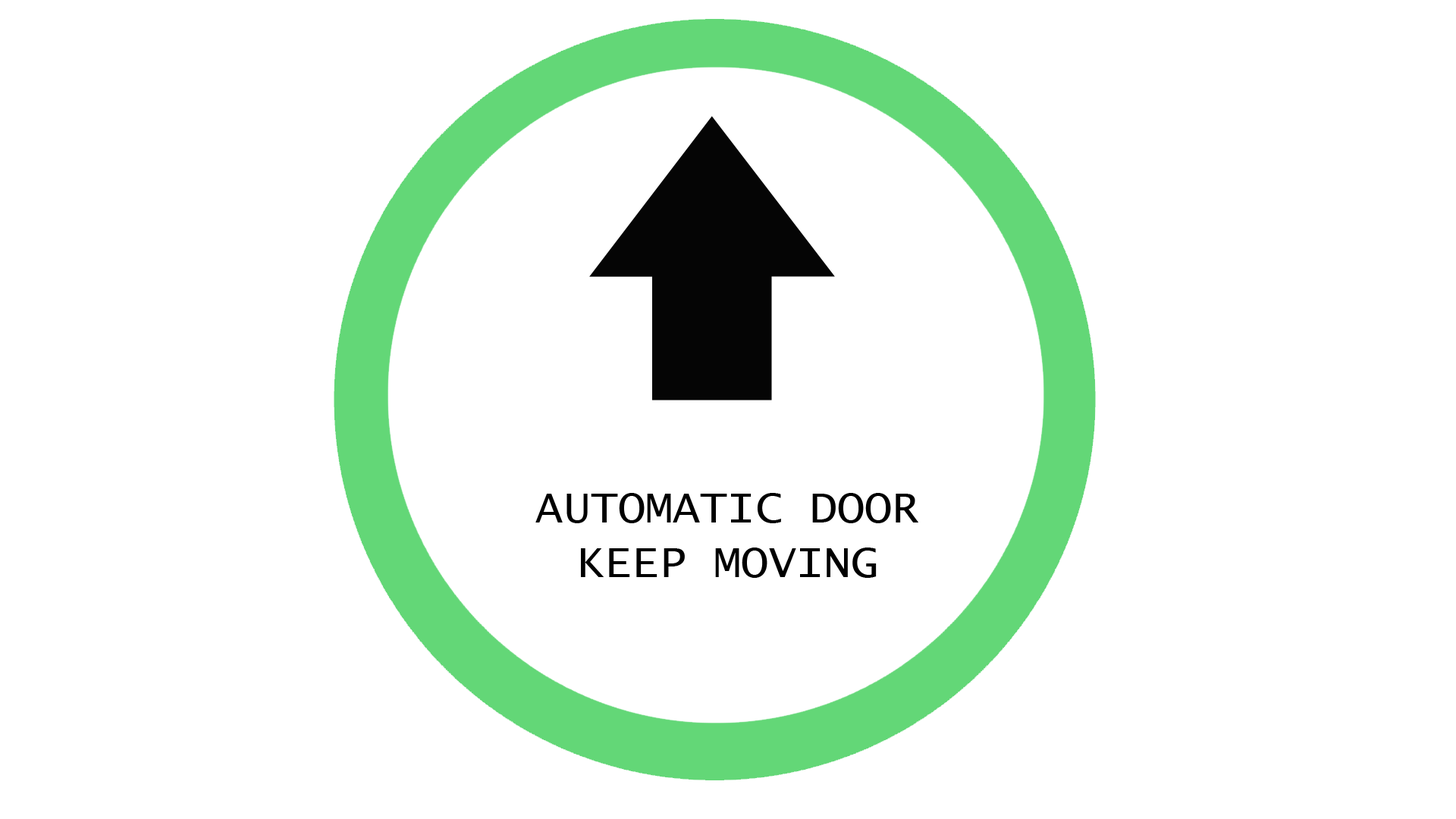
<style>
.page{position:relative;width:1456px;height:819px;background:#ffffff}
.page>*{position:absolute;margin:0}
.t1{font:45.5px "LucidaConsole";color:#000000}
</style>
<div class="page">
<p class="t1" style="left:535px;top:493px;width:383px;height:85px;text-align:center">AUTOMATIC DOOR<br>KEEP MOVING</p>
</div>
